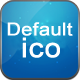
<style>
.page{position:relative;width:80px;height:80px}
.page>*{position:absolute;margin:0}
.t1{font:17.8px "ArialMT";color:#ffffff;font-weight:bold;scale:1.11 1}
.t2{font:27px "ArialMT";color:#ffffff;font-weight:bold;scale:1.11 1}
</style>
<div class="page">
<p class="t1" style="left:7px;top:22px;width:66px;height:14px">Default</p>
<p class="t2" style="left:22px;top:37px;width:38px;height:21px">ico</p>
</div>
